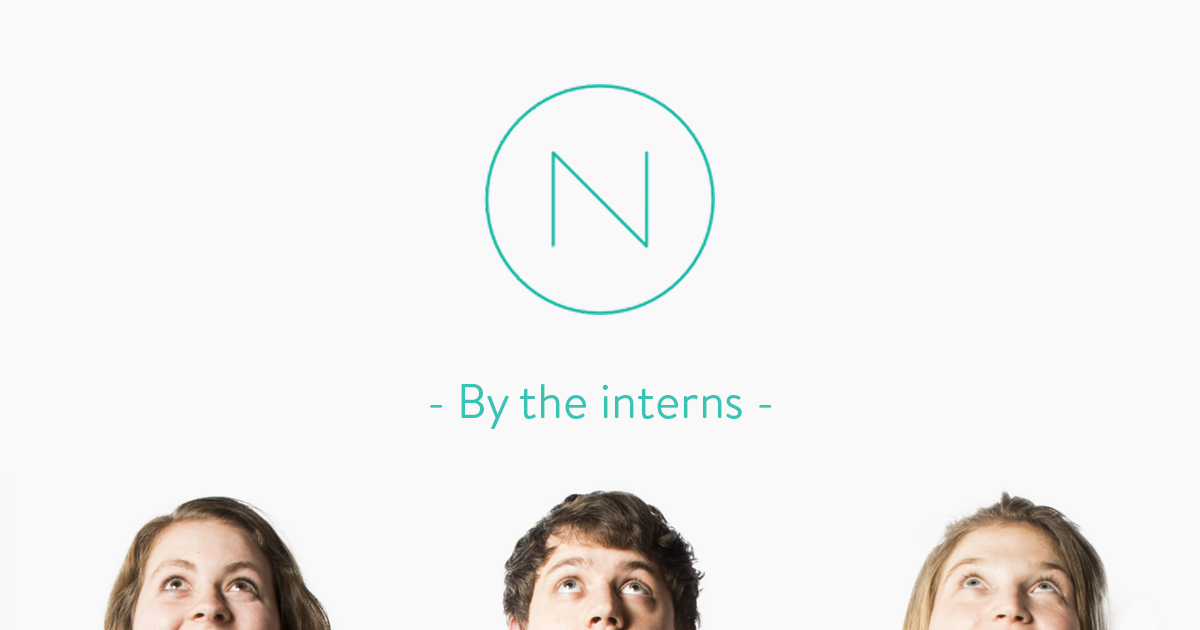
<style>
.page{position:relative;width:1200px;height:630px;background:#f9f9f9}
.page>*{position:absolute;margin:0}
.t1{font:48px "BrandonText-Regular";color:#38c3b3}
</style>
<div class="page">
<p class="t1" style="left:430px;top:384px;width:341px;height:45px">- By the interns -</p>
</div>
